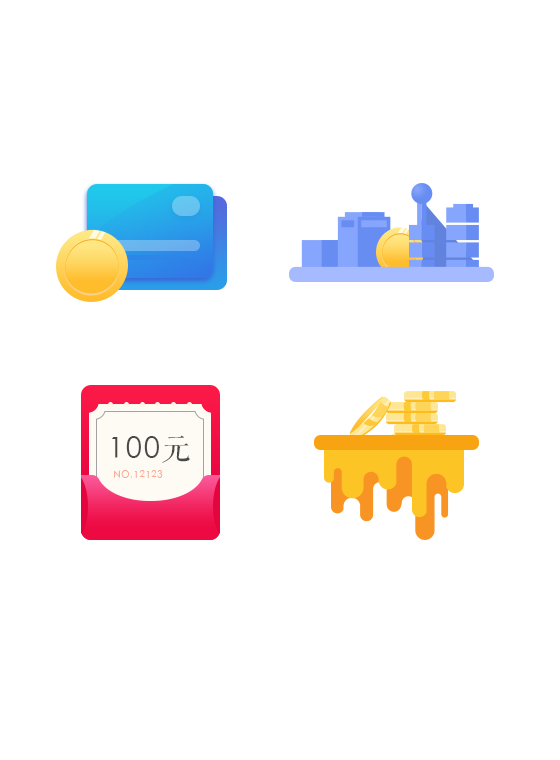
<style>
.page{position:relative;width:560px;height:760px;background:#ffffff}
.page>*{position:absolute;margin:0}
.t1{font:28.4px "STHeiti";letter-spacing:0.08em;color:#484848}
.t2{font:28.4px "FZQKBYSJW--GB1-0";letter-spacing:0.08em;color:#484848}
.t3{font:9.4px "STHeiti";letter-spacing:0.08em;color:#fba690}
</style>
<div class="page">
<p class="t1" style="left:112px;top:435px;width:78px;height:28px">100<span class="t2">元</span></p>
<p class="t3" style="left:114px;top:470px;width:49px;height:8px">NO.12123</p>
</div>
